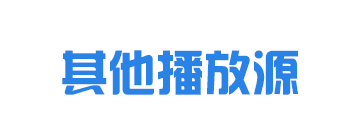
<style>
.page{position:relative;width:360px;height:140px;background:#ffffff}
.page>*{position:absolute;margin:0}
.t1{font:48.2px "aYinHanZhenGuangBiao-Regular";color:#2982e5}
</style>
<div class="page">
<p class="t1" style="left:62px;top:50px;width:236px;height:45px">其他播放源</p>
</div>
